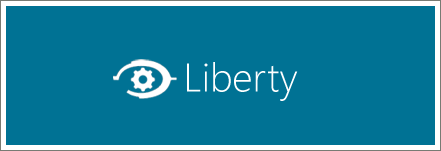
<style>
.page{position:relative;width:441px;height:151px;background:#007294}
.page>*{position:absolute;margin:0}
.t1{font:40px "SegoeUI-Light";color:#ffffff}
</style>
<div class="page">
<p class="t1" style="left:187px;top:62px;width:111px;height:39px">Liberty</p>
</div>
